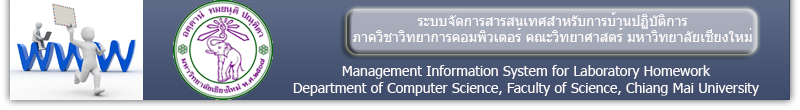
<style>
.page{position:relative;width:800px;height:110px}
.page>*{position:absolute;margin:0}
.t1{font:14px "Tahoma";color:#fcfafa}
.t2{font:14px "Tahoma";color:#fffafa}
</style>
<div class="page">
<p class="t1" style="left:353px;top:12px;width:399px;height:30px;text-align:center">ระบบจัดการสารสนเทศสำหรับการบ้านปฏิบัติการ<br>ภาควิชาวิทยาการคอมพิวเตอร์ คณะวิทยาศาสตร์ มหาวิทยาลัยเชียงใหม่</p>
<p class="t2" style="left:293px;top:65px;width:466px;height:31px;text-align:center">Management Information System for Laboratory Homework<br>Department of Computer Science, Faculty of Science, Chiang Mai University</p>
</div>
